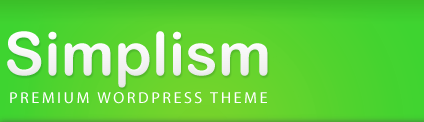
<style>
.page{position:relative;width:424px;height:122px}
.page>*{position:absolute;margin:0}
.t1{font:60px "ArialRoundedMTBold";letter-spacing:0.005em;color:#ffffff}
.t2{font:16px "MyriadPro-Regular";letter-spacing:0.16em;color:#ffffff}
</style>
<div class="page">
<p class="t1" style="left:7px;top:31px;width:261px;height:57px">Simplism</p>
<p class="t2" style="left:10px;top:92px;width:257px;height:12px">PREMIUM WORDPRESS THEME</p>
</div>
